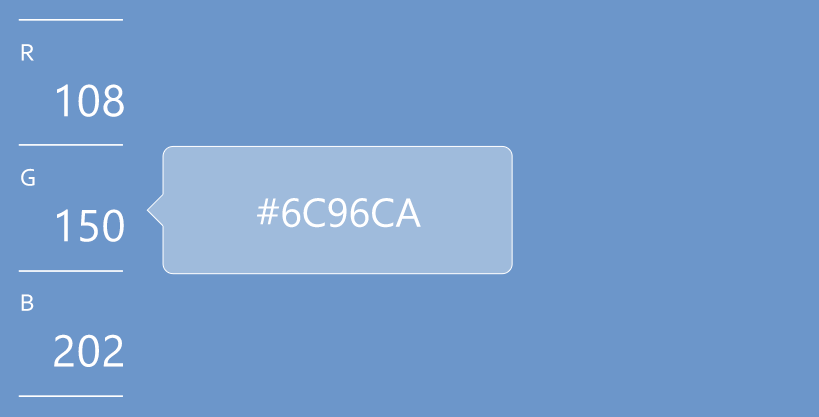
<style>
.page{position:relative;width:819px;height:417px;background:#6c96ca}
.page>*{position:absolute;margin:0}
.t1{font:25px/125.1px "Corbel";letter-spacing:0.02em;color:#ffffff}
.t2{font:44.4px/125.1px "Gadugi";letter-spacing:0.02em;color:#ffffff}
.t3{font:40.3px "Gadugi";color:#ffffff;text-transform:uppercase}
</style>
<div class="page">
<p class="t1" style="left:21px;top:44px;width:14px;height:267px">R<br>G<br>B</p>
<p class="t2" style="left:54px;top:84px;width:70px;height:283px;text-align:right">108<br>150<br>202</p>
<p class="t3" style="left:257px;top:198px;width:164px;height:30px">#6c96ca</p>
</div>
